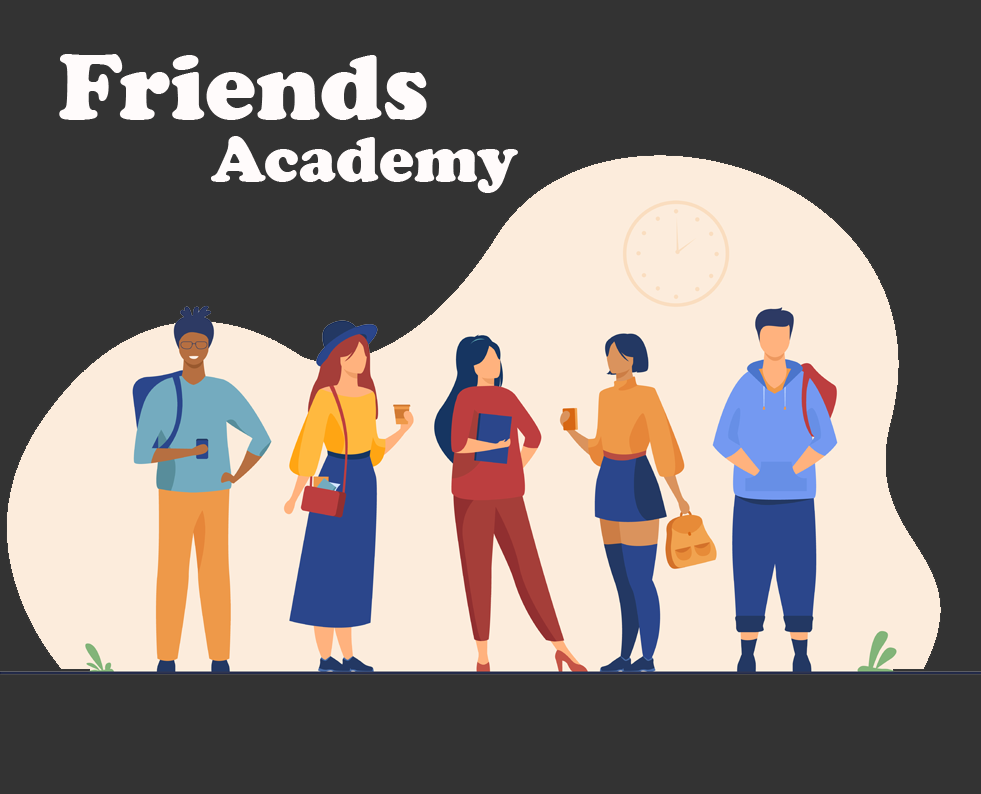
<style>
.page{position:relative;width:981px;height:794px;background:#333333}
.page>*{position:absolute;margin:0}
.t1{font:96.1px "CooperBlack";color:#fffbfb}
.t2{font:65.9px "CooperBlack";color:#fffbfb}
</style>
<div class="page">
<p class="t1" style="left:59px;top:54px;width:368px;height:66px">Friends</p>
<p class="t2" style="left:211px;top:136px;width:307px;height:57px">Academy</p>
</div>
